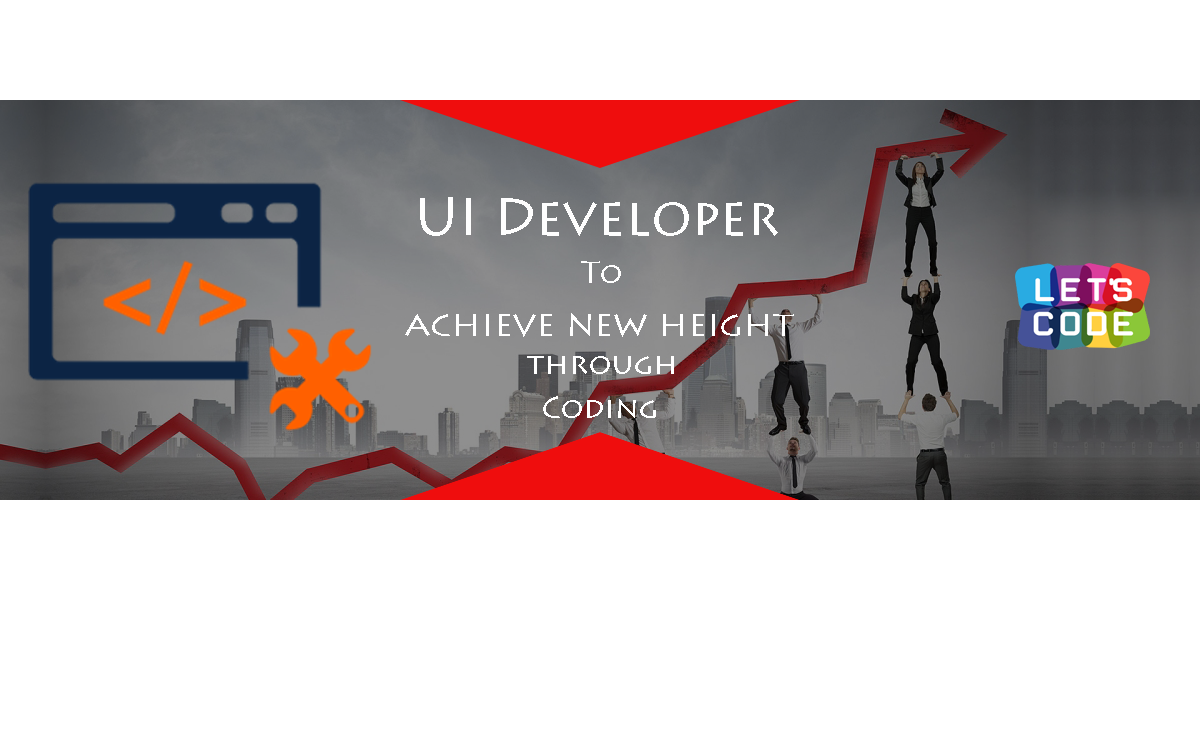
<style>
.page{position:relative;width:1200px;height:750px;background:#ffffff}
.page>*{position:absolute;margin:0}
.t1{font:53px "LithosPro-Regular";color:#fefefe}
.t2{font:30px "LithosPro-Regular";color:#fefefe}
.t3{font:36px "LithosPro-Regular";color:#ffffff}
.t4{font:30px "LithosPro-Regular";color:#ffffff}
</style>
<div class="page">
<p class="t1" style="left:420px;top:197px;width:358px;height:39px">UI Developer</p>
<p class="t2" style="left:581px;top:261px;width:40px;height:22px">To</p>
<p class="t3" style="left:405px;top:313px;width:389px;height:24px">achieve new height</p>
<p class="t4" style="left:527px;top:356px;width:147px;height:18px">through</p>
<p class="t4" style="left:543px;top:396px;width:113px;height:22px">Coding</p>
</div>
